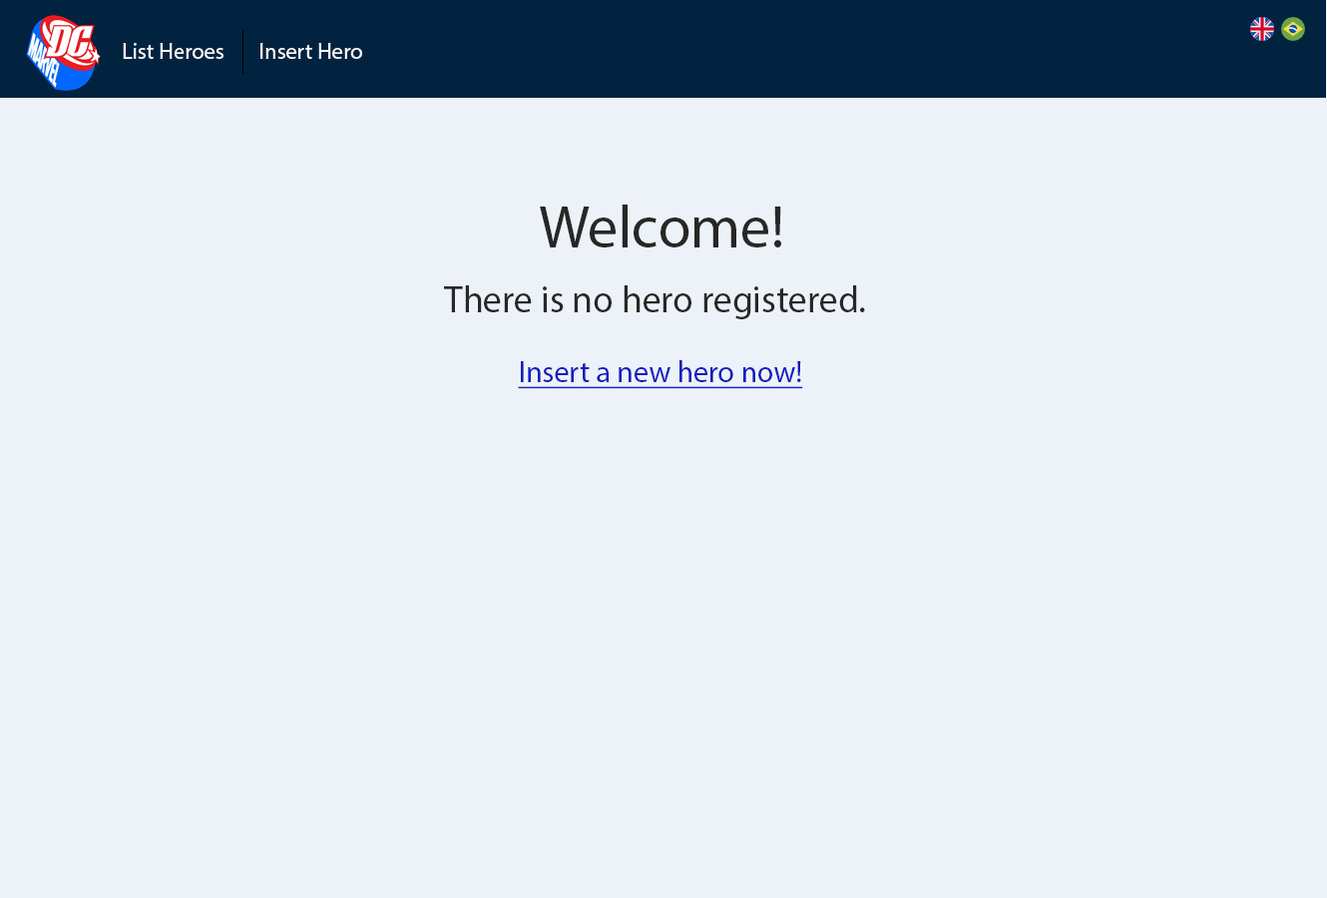
<style>
.page{position:relative;width:1327px;height:898px;background:#ecf2f7}
.page>*{position:absolute;margin:0}
.t1{font:22.5px "MyriadPro-Regular";color:#ffffff}
.t2{font:59.9px "MyriadPro-Regular";color:#272727}
.t3{font:37.4px "MyriadPro-Regular";color:#272727}
.t4{font:29.9px "MyriadPro-Regular";color:#161cbd;text-decoration:underline}
</style>
<div class="page">
<p class="t1" style="left:123px;top:43px;width:101px;height:16px">List Heroes</p>
<p class="t1" style="left:261px;top:43px;width:101px;height:16px">Insert Hero</p>
<p class="t2" style="left:540px;top:205px;width:242px;height:43px">Welcome!</p>
<p class="t3" style="left:444px;top:285px;width:421px;height:34px">There is no hero registered.</p>
<p class="t4" style="left:518px;top:360px;width:285px;height:29px">Insert a new hero now!</p>
</div>
